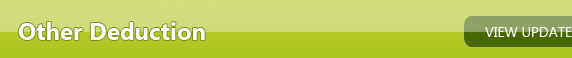
<style>
.page{position:relative;width:572px;height:58px}
.page>*{position:absolute;margin:0}
.t1{font:24px "SegoeUI-Bold";color:#fefefe}
.t2{font:14px "SegoeUI";color:#f6f7f1}
</style>
<div class="page">
<p class="t1" style="left:18px;top:22px;width:187px;height:18px">Other Deduction</p>
<p class="t2" style="left:485px;top:27px;width:87px;height:10px">VIEW UPDATE</p>
</div>
